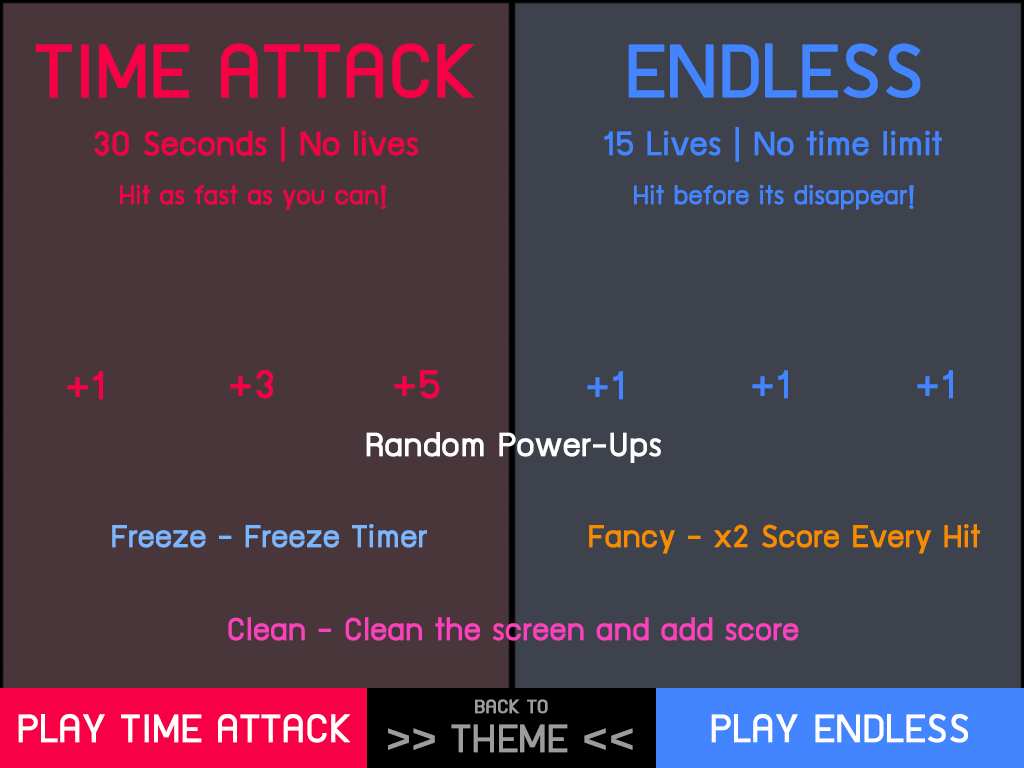
<style>
.page{position:relative;width:1024px;height:768px;background:#48363b}
.page>*{position:absolute;margin:0}
.t1{font:86px "supermarket";color:#f80046;font-weight:bold}
.t2{font:86px "supermarket";color:#4385ff;font-weight:bold}
.t3{font:38px "supermarket";color:#f80046;font-weight:bold}
.t4{font:38px "supermarket";color:#4385ff;font-weight:bold}
.t5{font:30px "supermarket";color:#f80046;font-weight:bold}
.t6{font:30px "supermarket";color:#4385ff;font-weight:bold}
.t7{font:45px "supermarket";color:#f80046;font-weight:bold}
.t8{font:45px "supermarket";color:#4385ff;font-weight:bold}
.t9{font:38px "supermarket";color:#ffffff;font-weight:bold}
.t10{font:36px "supermarket";color:#7cb6fe;font-weight:bold}
.t11{font:36px "supermarket";color:#f88c00;font-weight:bold}
.t12{font:36px "supermarket";color:#fb41bc;font-weight:bold}
.t13{font:22px "supermarket";color:#9c9c9c;font-weight:bold}
.t14{font:45px "supermarket";color:#ffffff;font-weight:bold}
.t15{font:45px "supermarket";color:#9c9c9c;font-weight:bold}
</style>
<div class="page">
<p class="t1" style="left:35px;top:43px;width:439px;height:55px">TIME ATTACK</p>
<p class="t2" style="left:628px;top:43px;width:293px;height:55px">ENDLESS</p>
<p class="t3" style="left:94px;top:127px;width:325px;height:35px">30 Seconds | No lives</p>
<p class="t4" style="left:604px;top:127px;width:338px;height:35px">15 Lives | No time limit</p>
<p class="t5" style="left:120px;top:184px;width:266px;height:26px">Hit as fast as you can!</p>
<p class="t6" style="left:634px;top:184px;width:280px;height:26px">Hit before its disappear!</p>
<p class="t7" style="left:67px;top:371px;width:36px;height:29px">+1</p>
<p class="t7" style="left:230px;top:370px;width:43px;height:29px">+3</p>
<p class="t7" style="left:394px;top:370px;width:46px;height:29px">+5</p>
<p class="t8" style="left:587px;top:371px;width:36px;height:29px">+1</p>
<p class="t8" style="left:752px;top:370px;width:36px;height:29px">+1</p>
<p class="t8" style="left:917px;top:370px;width:36px;height:29px">+1</p>
<p class="t9" style="left:366px;top:432px;width:295px;height:31px">Random Power-Ups</p>
<p class="t10" style="left:112px;top:524px;width:315px;height:24px">Freeze - Freeze Timer</p>
<p class="t11" style="left:589px;top:524px;width:391px;height:30px">Fancy - x2 Score Every Hit</p>
<p class="t12" style="left:228px;top:617px;width:571px;height:24px">Clean - Clean the screen and add score</p>
<p class="t13" style="left:475px;top:699px;width:73px;height:15px">BACK TO</p>
<p class="t14" style="left:18px;top:714px;width:332px;height:29px">PLAY TIME ATTACK</p>
<p class="t15" style="left:388px;top:724px;width:245px;height:29px">&gt;&gt; THEME &lt;&lt;</p>
<p class="t14" style="left:711px;top:714px;width:258px;height:29px">PLAY ENDLESS</p>
</div>
